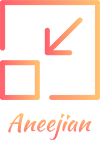
<style>
.page{position:relative;width:100px;height:150px;background:#ffffff}
.page>*{position:absolute;margin:0}
.t1{font:24px "KaushanScript-Regular";color:#ff9c6f}
</style>
<div class="page">
<p class="t1" style="left:8px;top:113px;width:84px;height:27px">Aneejian</p>
</div>
